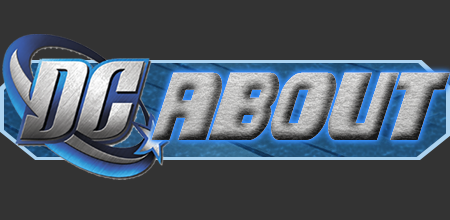
<style>
.page{position:relative;width:450px;height:220px;background:#333333}
.page>*{position:absolute;margin:0}
.t1{font:100px "CampJusticeItalic";letter-spacing:-0.04em}
</style>
<div class="page">
<p class="t1" style="left:151px;top:72px;width:299px;height:68px">about</p>
<p class="t1" style="left:151px;top:72px;width:299px;height:68px">about</p>
<p class="t1" style="left:151px;top:72px;width:299px;height:68px">about</p>
</div>
